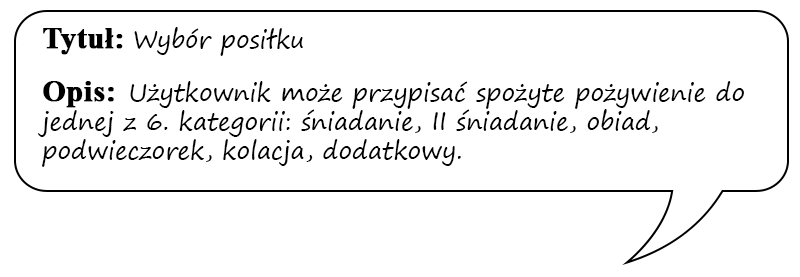
<style>
.page{position:relative;width:800px;height:277px;background:#ffffff}
.page>*{position:absolute;margin:0}
.t1{font:24px "SegoePrint";color:#000000}
.t2{font:30px "TimesNewRomanPS-BoldMT";color:#000000;font-weight:bold}
</style>
<div class="page">
<p class="t1" style="left:38px;top:27px;width:706px;height:140px"><span class="t2">Tytuł: </span>Wybór posiłku<br><br><span class="t2">Opis:  </span>Użytkownik może przypisać spożyte pożywienie do jednej z 6. kategorii: śniadanie, II śniadanie, obiad, podwieczorek, kolacja, dodatkowy.</p>
</div>
